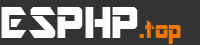
<style>
.page{position:relative;width:200px;height:45px;background:#333333}
.page>*{position:absolute;margin:0}
.t1{font:49px "ARDESTINE";color:#fcfefe}
.t2{font:25px "ARDESTINE";color:#ec7801}
</style>
<div class="page">
<p class="t1" style="left:1px;top:7px;width:137px;height:31px">ESPHP</p>
<p class="t2" style="left:139px;top:20px;width:42px;height:24px">.top</p>
</div>
